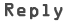
<style>
.page{position:relative;width:72px;height:25px;background:#ffffff}
.page>*{position:absolute;margin:0}
.t1{font:16.4px "OCRAStd";color:#484848;font-weight:bold}
</style>
<div class="page">
<p class="t1" style="left:5px;top:3px;width:58px;height:18px">Reply</p>
</div>
